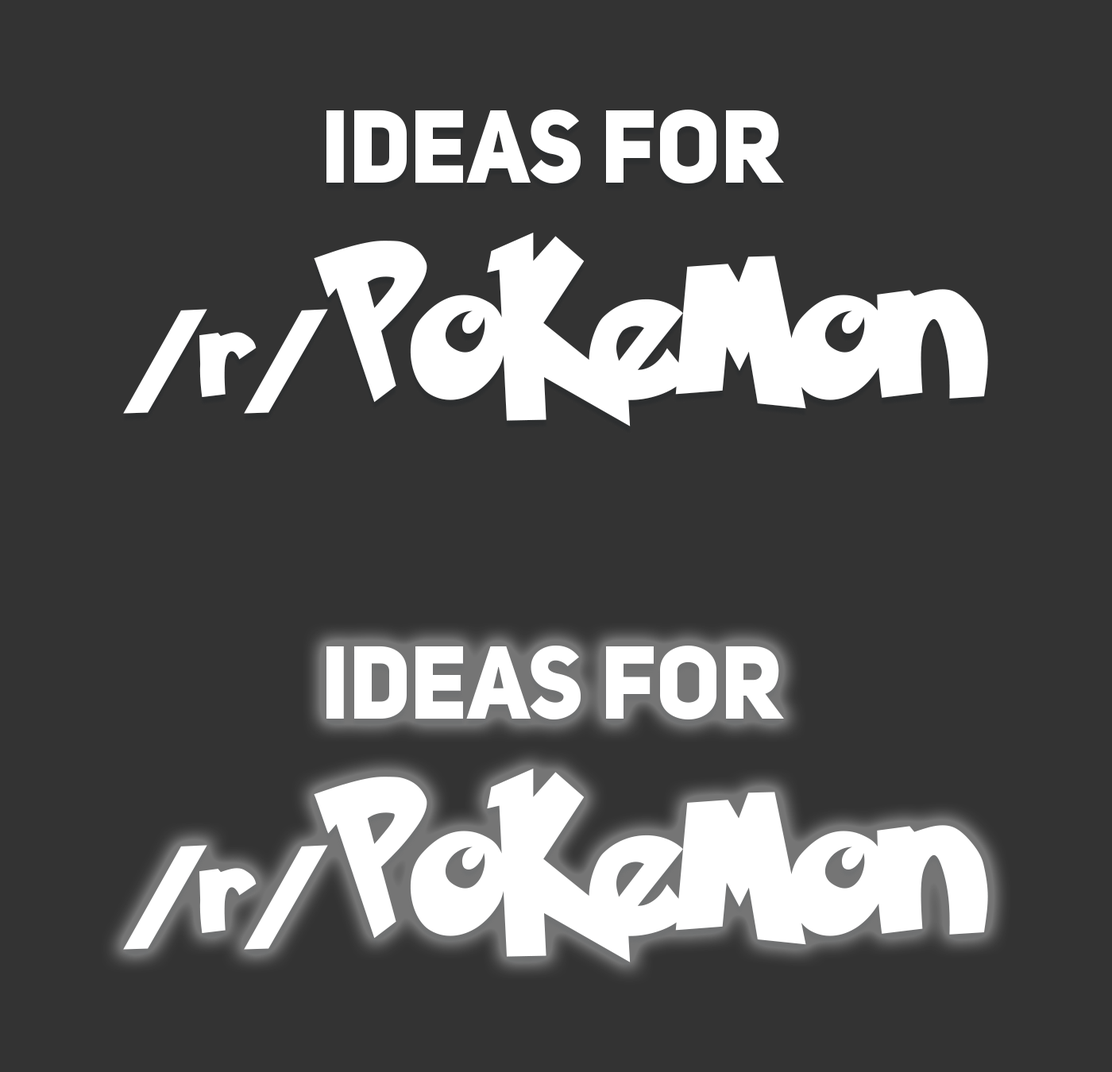
<style>
.page{position:relative;width:1112px;height:1072px;background:#333333}
.page>*{position:absolute;margin:0}
.t1{font:101.7px "UniSansHeavyCAPS";color:#ffffff;scale:0.95 1}
.t2{font:101.7px "PokemonSolidNormal";color:#ffffff;scale:0.95 1}
.t3{font:177.9px "PokemonSolidNormal";color:#ffffff;scale:0.95 1}
</style>
<div class="page">
<p class="t1" style="left:123px;top:109px;width:865px;height:318px;text-align:center">IDEAS FOR <br><span class="t2">/r/</span><span class="t3">PoKeMon</span></p>
<p class="t1" style="left:123px;top:645px;width:865px;height:318px;text-align:center">IDEAS FOR <br><span class="t2">/r/</span><span class="t3">PoKeMon</span></p>
</div>
